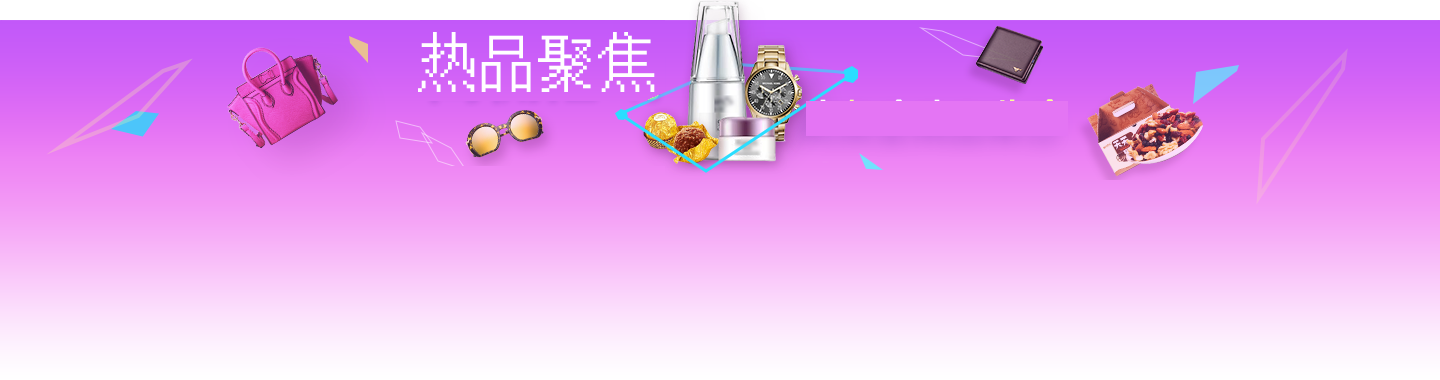
<style>
.page{position:relative;width:1440px;height:380px}
.page>*{position:absolute;margin:0}
.t1{font:60px "GB18030Bitmap";color:#ffffff}
</style>
<div class="page">
<p class="t1" style="left:418px;top:32px;width:237px;height:60px">热品聚焦</p>
</div>
